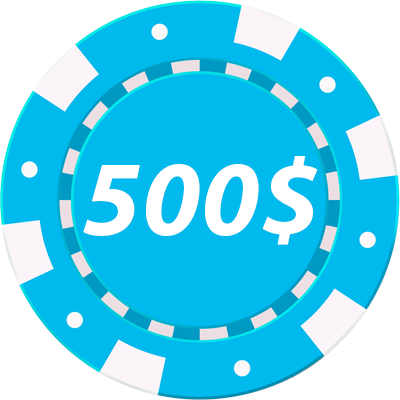
<style>
.page{position:relative;width:400px;height:400px;background:#00baed}
.page>*{position:absolute;margin:0}
.t1{font:108.3px "MyriadPro-BoldIt";letter-spacing:0.01em;color:#ffffff}
</style>
<div class="page">
<p class="t1" style="left:83px;top:156px;width:235px;height:89px">500$</p>
</div>
